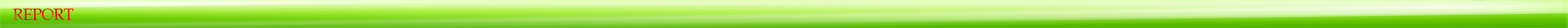
<style>
.page{position:relative;width:1568px;height:28px}
.page>*{position:absolute;margin:0}
.t1{font:16.7px "BookAntiqua";letter-spacing:-0.025em;scale:0.95 1}
</style>
<div class="page">
<p class="t1" style="left:13px;top:9px;width:61px;height:11px">REPORT</p>
</div>
